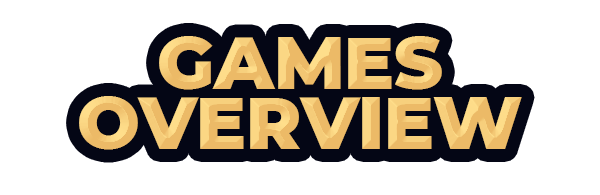
<style>
.page{position:relative;width:600px;height:195px;background:#ffffff}
.page>*{position:absolute;margin:0}
.t1{font:74.1px/60.8px "Montserrat-Black";color:#ecba67}
</style>
<div class="page">
<p class="t1" style="left:79px;top:36px;width:443px;height:114px;text-align:center">GAMES<br>OVERVIEW</p>
</div>
